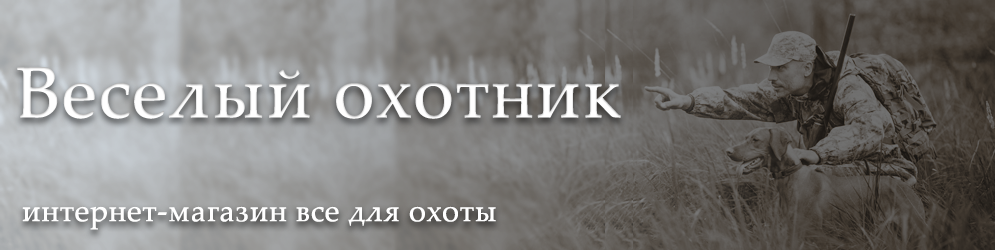
<style>
.page{position:relative;width:995px;height:250px}
.page>*{position:absolute;margin:0}
.t1{font:72px "PalatinoLinotype-Roman";color:#ffffff;font-weight:bold}
.t2{font:30px "PalatinoLinotype-Roman";color:#ffffff;font-weight:bold}
</style>
<div class="page">
<p class="t1" style="left:17px;top:67px;width:604px;height:52px">Веселый охотник</p>
<p class="t2" style="left:22px;top:206px;width:474px;height:24px">интернет-магазин все для охоты</p>
</div>
